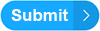
<style>
.page{position:relative;width:100px;height:31px;background:#17a9ff}
.page>*{position:absolute;margin:0}
.t1{font:17px "Arial-BoldMT";color:#ffffff}
</style>
<div class="page">
<p class="t1" style="left:11px;top:9px;width:57px;height:12px">Submit</p>
</div>
